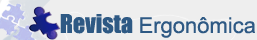
<style>
.page{position:relative;width:257px;height:40px;background:#eeeeee}
.page>*{position:absolute;margin:0}
.t1{font:22px "ArialMT";color:#2e5984}
.t2{font:24px "Impact";color:#2e5984}
</style>
<div class="page">
<p class="t1" style="left:60px;top:14px;width:195px;height:24px"><span class="t2">Revista </span>Ergonômica</p>
</div>
